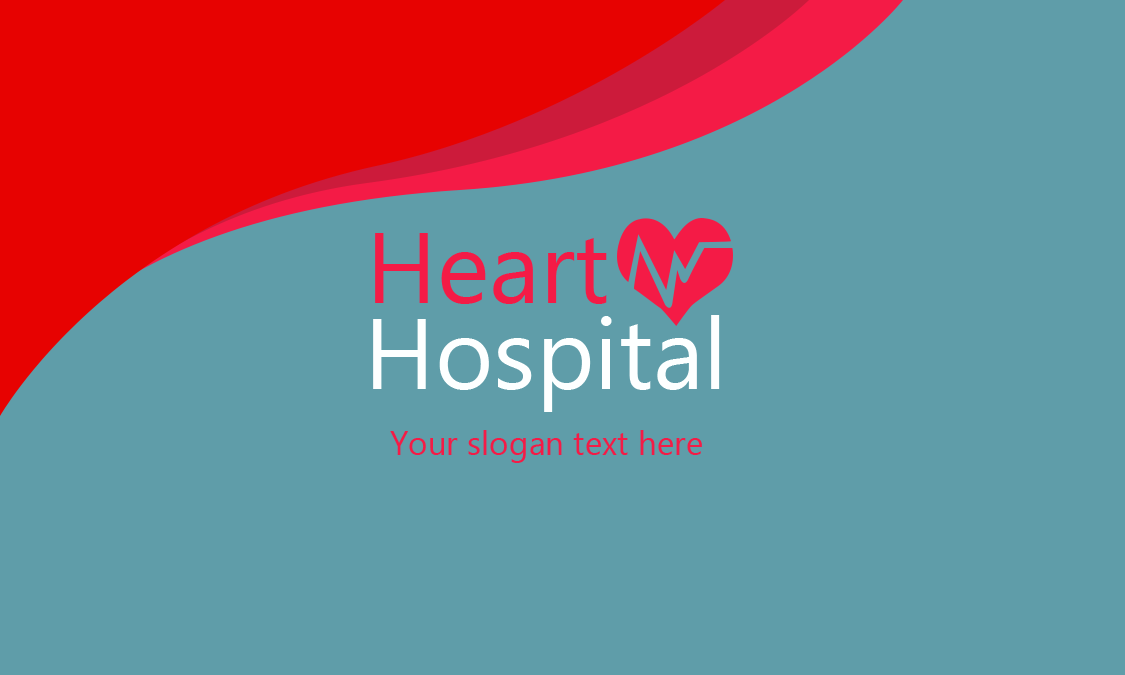
<style>
.page{position:relative;width:1125px;height:675px;background:#5f9da9}
.page>*{position:absolute;margin:0}
.t1{font:100px "NirmalaUI";color:#f41b46}
.t2{font:100px "NirmalaUI";color:#fdffff}
.t3{font:33.3px "NirmalaUI";color:#f41b46}
</style>
<div class="page">
<p class="t1" style="left:375px;top:233px;width:232px;height:71px">Heart</p>
<p class="t2" style="left:373px;top:315px;width:347px;height:97px">Hospital</p>
<p class="t3" style="left:390px;top:430px;width:312px;height:33px">Your slogan text here</p>
</div>
